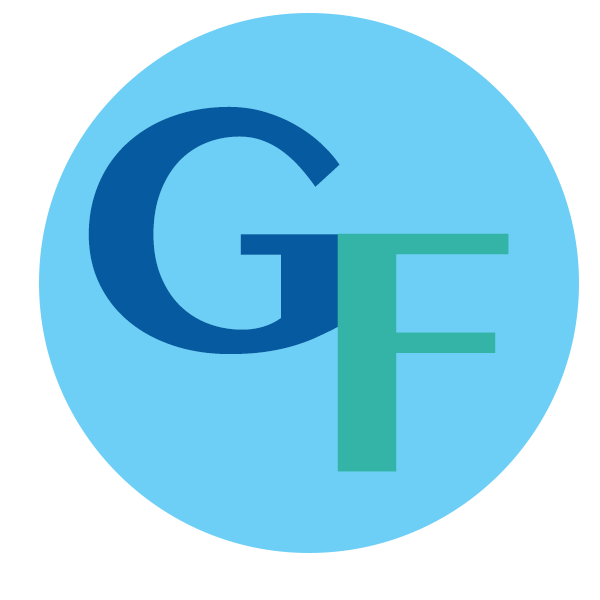
<style>
.page{position:relative;width:600px;height:600px;background:#6dcff6}
.page>*{position:absolute;margin:0}
.t1{font:300px "BanglaMN-Bold";color:#065ba0}
.t2{font:300px "BanglaMN-Bold";color:#34b4a7}
</style>
<div class="page">
<p class="t1" style="left:88px;top:106px;width:252px;height:248px">G</p>
<p class="t2" style="left:337px;top:233px;width:172px;height:239px">F</p>
</div>
